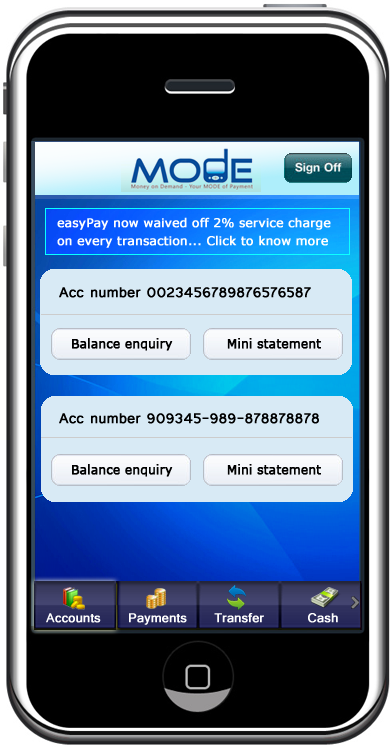
<style>
.page{position:relative;width:390px;height:747px;background:#000000}
.page>*{position:absolute;margin:0}
.t1{font:12px/18px "Verdana";color:#ffffff;font-weight:bold}
.t2{font:18px "Tunga";color:#000000;font-weight:bold}
.t3{font:12px "Verdana";color:#000000;font-weight:bold}
.t4{font:16px "Tunga";color:#ffffff;font-weight:bold}
</style>
<div class="page">
<p class="t1" style="left:57px;top:217px;width:274px;height:31px">easyPay now waived off 2% service charge<br>on every transaction... Click to know more</p>
<p class="t2" style="left:59px;top:287px;width:252px;height:11px">Acc number 0023456789876576587</p>
<p class="t3" style="left:72px;top:338px;width:249px;height:13px">Balance enquiry            Mini statement</p>
<p class="t2" style="left:59px;top:413px;width:260px;height:11px">Acc number 909345-989-878878878</p>
<p class="t3" style="left:72px;top:464px;width:249px;height:13px">Balance enquiry            Mini statement</p>
<p class="t4" style="left:46px;top:613px;width:292px;height:12px">Accounts     Payments     Transfer        Cash</p>
</div>
